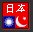
<style>
.page{position:relative;width:33px;height:32px;background:#333333}
.page>*{position:absolute;margin:0}
.t1{font:10.4px "SimSun";color:#ffffff}
</style>
<div class="page">
<p class="t1" style="left:7px;top:4px;width:18px;height:9px">日本</p>
</div>
